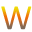
<style>
.page{position:relative;width:32px;height:32px;background:#ffffff}
.page>*{position:absolute;margin:0}
.t1{font:36px "Calibri"}
</style>
<div class="page">
<p class="t1" style="left:1px;top:6px;width:31px;height:24px">W</p>
</div>
